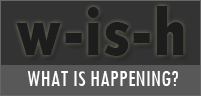
<style>
.page{position:relative;width:201px;height:96px;background:#333333}
.page>*{position:absolute;margin:0}
.t1{font:72px "TwCenMT-CondensedExtraBold";color:#1d1d1d}
.t2{font:24px "TwCenMT-Condensed";color:#fefefe}
</style>
<div class="page">
<p class="t1" style="left:16px;top:6px;width:168px;height:50px">w-is-h</p>
<p class="t2" style="left:27px;top:71px;width:151px;height:15px">WHAT IS HAPPENING?</p>
</div>
